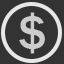
<style>
.page{position:relative;width:64px;height:64px;background:#333333}
.page>*{position:absolute;margin:0}
.t1{font:50px "FranklinGothic-Medium";color:#cccccc}
</style>
<div class="page">
<p class="t1" style="left:19px;top:12px;width:26px;height:42px">$</p>
</div>
